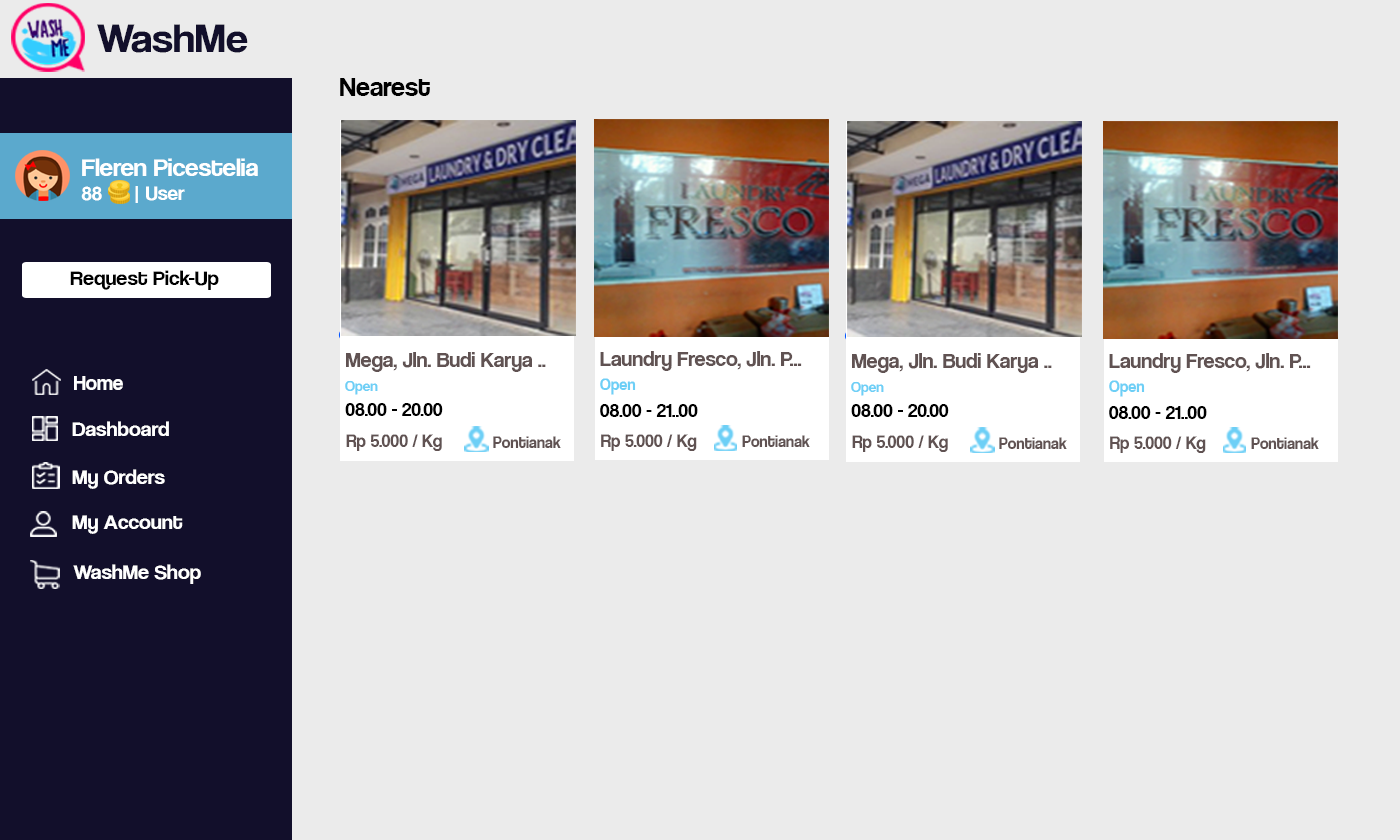
<style>
.page{position:relative;width:1400px;height:840px;background:#ebebeb}
.page>*{position:absolute;margin:0}
.t1{font:42.1px "CoolveticaRg-Regular";color:#120f2b;scale:1.05 1}
.t2{font:30px "Coolvetica-Regular";color:#000000}
.t3{font:25.2px "CoolveticaRg-Regular";color:#ffffff;scale:1.05 1}
.t4{font:20px "CoolveticaRg-Regular";color:#ffffff;scale:1.05 1}
.t5{font:21px "CoolveticaRg-Regular";color:#000000;scale:1.05 1}
.t6{font:22.2px "CoolveticaRg-Regular";color:#605252}
.t7{font:21px "CoolveticaRg-Regular";color:#ffffff}
.t8{font:13.6px "CoolveticaRg-Regular";color:#6dcff6;scale:1.11 1}
.t9{font:16.7px "CoolveticaRg-Regular";color:#6dcff6}
.t10{font:20.4px "CoolveticaRg-Regular";color:#000000}
.t11{font:21px "CoolveticaRg-Regular";color:#ffffff;scale:1.05 1}
.t12{font:18.5px "CoolveticaRg-Regular";color:#605252}
.t13{font:16.7px "CoolveticaRg-Regular";color:#605252}
</style>
<div class="page">
<p class="t1" style="left:97px;top:24px;width:151px;height:29px">WashMe</p>
<p class="t2" style="left:340px;top:78px;width:90px;height:18px">Nearest</p>
<p class="t3" style="left:81px;top:158px;width:177px;height:45px">Fleren Picestelia<br><span class="t4">88      | User</span></p>
<p class="t5" style="left:70px;top:270px;width:149px;height:20px">Request Pick-Up</p>
<p class="t6" style="left:346px;top:352px;width:200px;height:20px">Mega, Jln. Budi Karya ..</p>
<p class="t6" style="left:346px;top:352px;width:200px;height:20px">Mega, Jln. Budi Karya ..</p>
<p class="t6" style="left:600px;top:351px;width:202px;height:20px">Laundry Fresco, Jln. P...</p>
<p class="t6" style="left:600px;top:351px;width:202px;height:20px">Laundry Fresco, Jln. P...</p>
<p class="t6" style="left:852px;top:353px;width:200px;height:20px">Mega, Jln. Budi Karya ..</p>
<p class="t6" style="left:852px;top:353px;width:200px;height:20px">Mega, Jln. Budi Karya ..</p>
<p class="t6" style="left:1109px;top:353px;width:202px;height:20px">Laundry Fresco, Jln. P...</p>
<p class="t6" style="left:1109px;top:353px;width:202px;height:20px">Laundry Fresco, Jln. P...</p>
<p class="t7" style="left:74px;top:376px;width:49px;height:14px">Home</p>
<p class="t8" style="left:345px;top:380px;width:33px;height:15px">Open</p>
<p class="t9" style="left:600px;top:378px;width:36px;height:17px">Open</p>
<p class="t8" style="left:851px;top:381px;width:33px;height:15px">Open</p>
<p class="t9" style="left:1109px;top:380px;width:36px;height:17px">Open</p>
<p class="t10" style="left:345px;top:403px;width:98px;height:13px">08.00 - 20.00</p>
<p class="t10" style="left:345px;top:403px;width:98px;height:13px">08.00 - 20.00</p>
<p class="t10" style="left:600px;top:404px;width:98px;height:13px">08.00 - 21..00</p>
<p class="t10" style="left:600px;top:404px;width:98px;height:13px">08.00 - 21..00</p>
<p class="t10" style="left:851px;top:404px;width:98px;height:13px">08.00 - 20.00</p>
<p class="t10" style="left:851px;top:404px;width:98px;height:13px">08.00 - 20.00</p>
<p class="t10" style="left:1109px;top:406px;width:98px;height:13px">08.00 - 21..00</p>
<p class="t10" style="left:1109px;top:406px;width:98px;height:13px">08.00 - 21..00</p>
<p class="t11" style="left:72px;top:421px;width:97px;height:15px">Dashboard</p>
<p class="t12" style="left:346px;top:434px;width:96px;height:17px">Rp 5.000 / Kg</p>
<p class="t12" style="left:346px;top:434px;width:96px;height:17px">Rp 5.000 / Kg</p>
<p class="t13" style="left:493px;top:436px;width:68px;height:12px">Pontianak</p>
<p class="t13" style="left:493px;top:436px;width:68px;height:12px">Pontianak</p>
<p class="t12" style="left:601px;top:434px;width:96px;height:17px">Rp 5.000 / Kg</p>
<p class="t12" style="left:601px;top:434px;width:96px;height:17px">Rp 5.000 / Kg</p>
<p class="t13" style="left:742px;top:435px;width:68px;height:12px">Pontianak</p>
<p class="t12" style="left:852px;top:435px;width:96px;height:17px">Rp 5.000 / Kg</p>
<p class="t12" style="left:852px;top:435px;width:96px;height:17px">Rp 5.000 / Kg</p>
<p class="t13" style="left:999px;top:437px;width:68px;height:12px">Pontianak</p>
<p class="t13" style="left:999px;top:437px;width:68px;height:12px">Pontianak</p>
<p class="t12" style="left:1110px;top:436px;width:96px;height:17px">Rp 5.000 / Kg</p>
<p class="t12" style="left:1110px;top:436px;width:96px;height:17px">Rp 5.000 / Kg</p>
<p class="t13" style="left:1251px;top:437px;width:68px;height:12px">Pontianak</p>
<p class="t11" style="left:72px;top:469px;width:93px;height:20px">My Orders</p>
<p class="t11" style="left:72px;top:515px;width:111px;height:19px">My Account</p>
<p class="t11" style="left:73px;top:564px;width:128px;height:20px">WashMe Shop</p>
</div>
